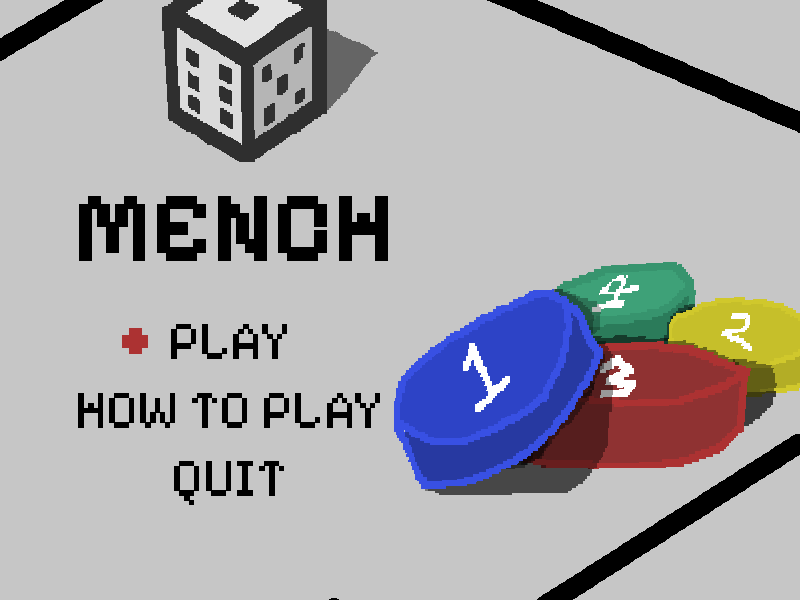
<style>
.page{position:relative;width:800px;height:600px;background:#c6c6c6}
.page>*{position:absolute;margin:0}
.t1{font:100.8px "PixelifySans-Bold";color:#000000}
.t2{font:53.6px "PixelifySans-Regular";color:#000000}
</style>
<div class="page">
<p class="t1" style="left:79px;top:196px;width:309px;height:65px">MENCH</p>
<p class="t2" style="left:171px;top:324px;width:116px;height:35px">PLAY</p>
<p class="t2" style="left:78px;top:393px;width:302px;height:35px">HOW TO PLAY</p>
<p class="t2" style="left:174px;top:461px;width:110px;height:44px">QUIT</p>
</div>
